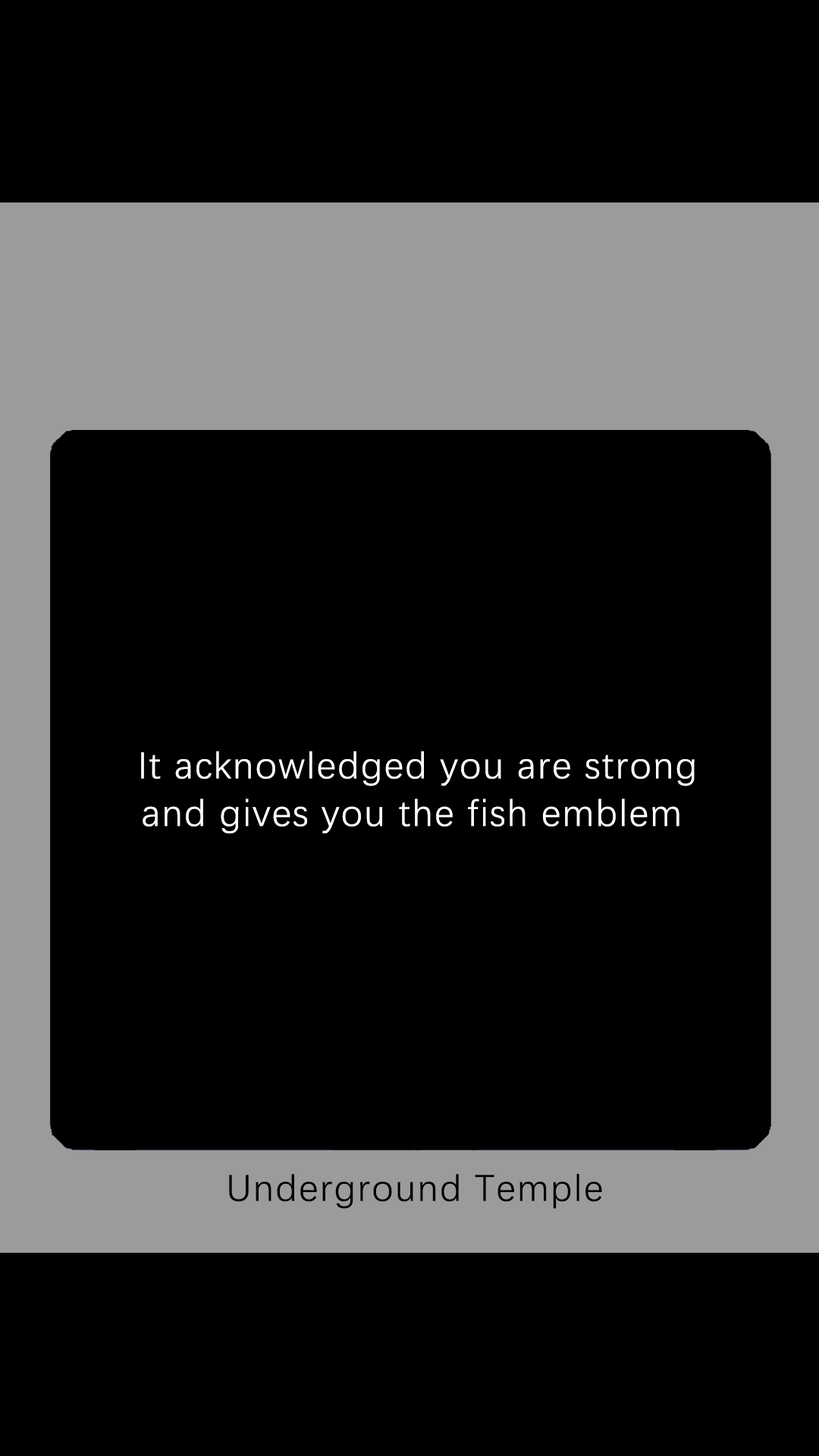
<style>
.page{position:relative;width:819px;height:1456px;background:#000000}
.page>*{position:absolute;margin:0}
.t1{font:37.9px/47.6px "DengXian-Regular";letter-spacing:0.04em;color:#ffffff}
.t2{font:37.9px "DengXian-Regular";letter-spacing:0.04em;color:#000000}
</style>
<div class="page">
<p class="t1" style="left:141px;top:751px;width:554px;height:82px;text-align:center">It acknowledged you are strong<br>and gives you the fish emblem</p>
<p class="t2" style="left:229px;top:1174px;width:373px;height:35px">Underground Temple</p>
</div>
